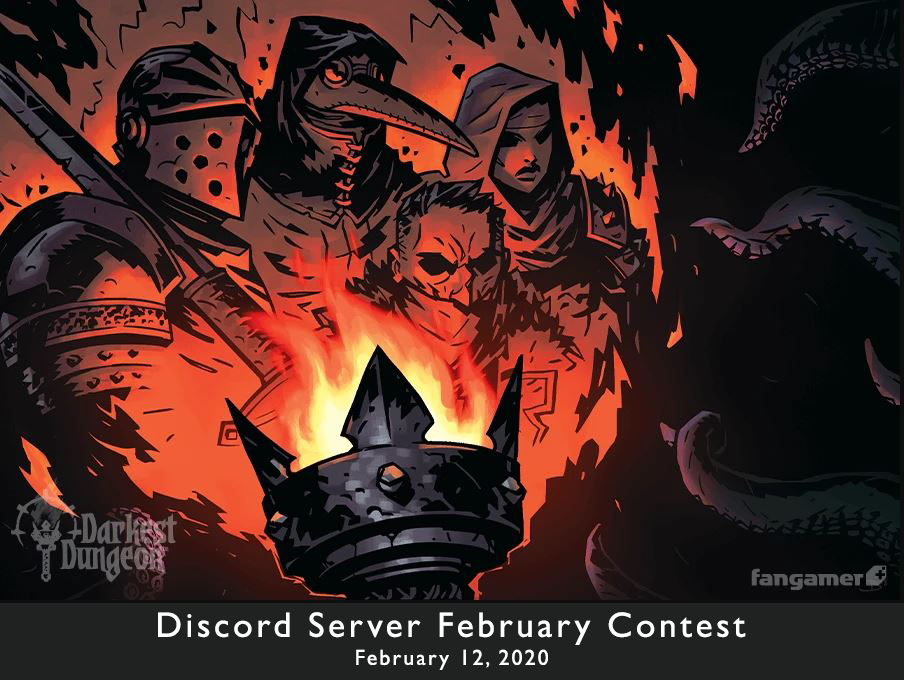
<style>
.page{position:relative;width:904px;height:680px}
.page>*{position:absolute;margin:0}
.t1{font:35.5px "GillSansMT";letter-spacing:0.1em;color:#ffffff}
.t2{font:21.8px "GillSansMT";letter-spacing:0.1em;color:#ffffff}
</style>
<div class="page">
<p class="t1" style="left:158px;top:612px;width:588px;height:33px">Discord Server February Contest</p>
<p class="t2" style="left:356px;top:649px;width:192px;height:21px">February 12, 2020</p>
</div>
